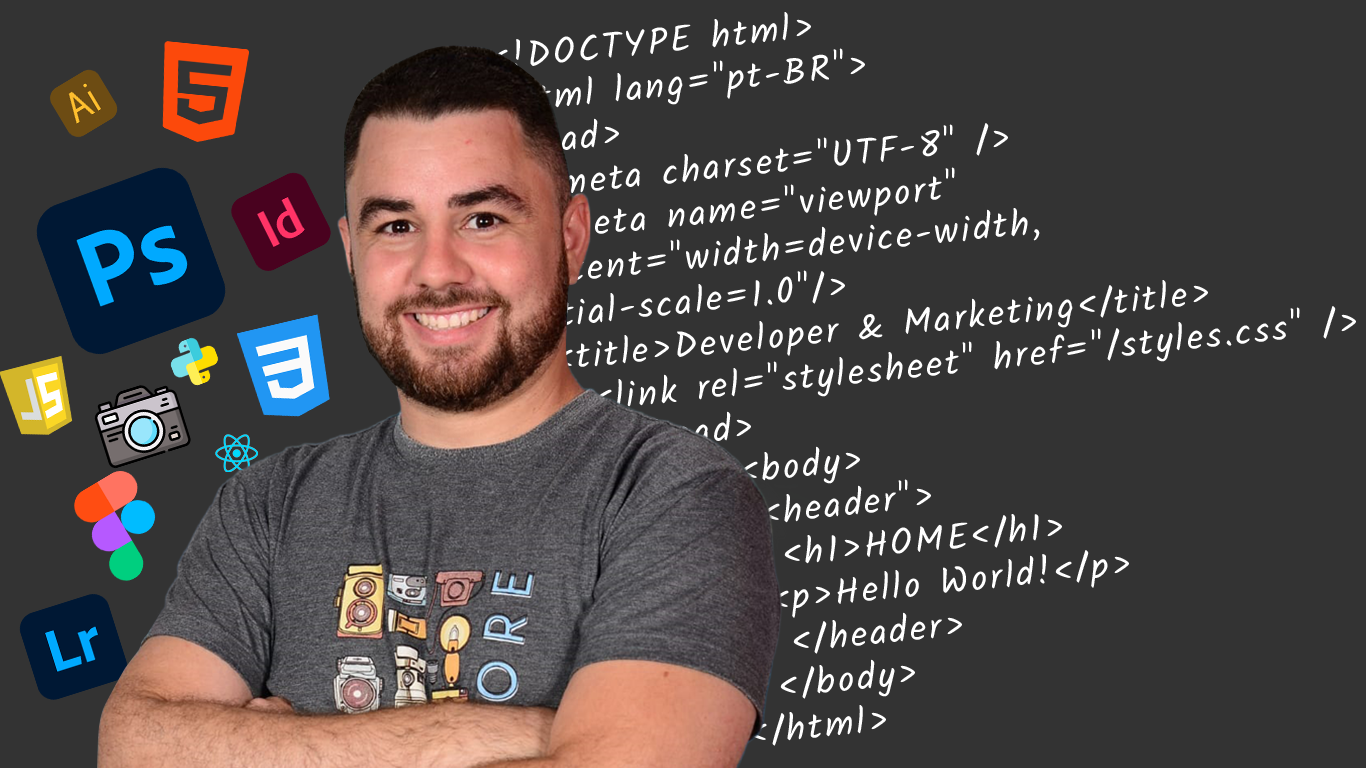
<style>
.page{position:relative;width:1366px;height:768px;background:#333333}
.page>*{position:absolute;margin:0}
.t1{font:36.3px "Kalam-Regular";letter-spacing:0.075em;color:#ffffff}
</style>
<div class="page">
<p class="t1" style="left:491px;top:12px;width:865px;height:734px;rotate:-6deg">&lt;!DOCTYPE html&gt;<br>&lt;html lang="pt-BR"&gt;<br>&lt;head&gt;<br>  &lt;meta charset="UTF-8" /&gt;<br>  &lt;meta name="viewport" <br>content="width=device-width, <br>initial-scale=1.0"/&gt;<br>  &lt;title&gt;Developer &amp; Marketing&lt;/title&gt;<br>    &lt;link rel="stylesheet" href="/styles.css" /&gt;<br>     &lt;/head&gt;<br>            &lt;body&gt;<br>             &lt;header"&gt;<br>              &lt;h1&gt;HOME&lt;/h1&gt;<br>             &lt;p&gt;Hello World!&lt;/p&gt;<br>              &lt;/header&gt;<br>             &lt;/body&gt;<br>           &lt;/html&gt;</p>
</div>
